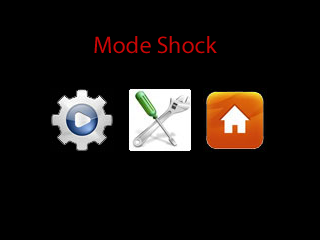
<style>
.page{position:relative;width:320px;height:240px;background:#000000}
.page>*{position:absolute;margin:0}
.t1{font:24px "MyriadPro-Regular";color:#ca0606}
</style>
<div class="page">
<p class="t1" style="left:94px;top:36px;width:123px;height:18px">Mode Shock</p>
</div>
